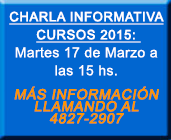
<style>
.page{position:relative;width:171px;height:140px;background:#0166d0}
.page>*{position:absolute;margin:0}
.t1{font:14px/12px "ArialMT";letter-spacing:0.025em;color:#ff9600;font-weight:bold;font-style:italic}
.t2{font:13px/18px "ArialMT";letter-spacing:0.025em;color:#ffffff;font-weight:bold;text-decoration:underline}
.t3{font:14px/18px "ArialMT";letter-spacing:0.025em;color:#ffffff}
</style>
<div class="page">
<p class="t1" style="left:9px;top:11px;width:155px;height:113px;text-align:center"><span class="t2">CHARLA INFORMATIVA CURSOS 2015: <br></span><span class="t3">Martes 17 de Marzo a las 15 hs.<br><br></span>MÁS INFORMACIÓN LLAMANDO AL 4827-2907</p>
</div>
